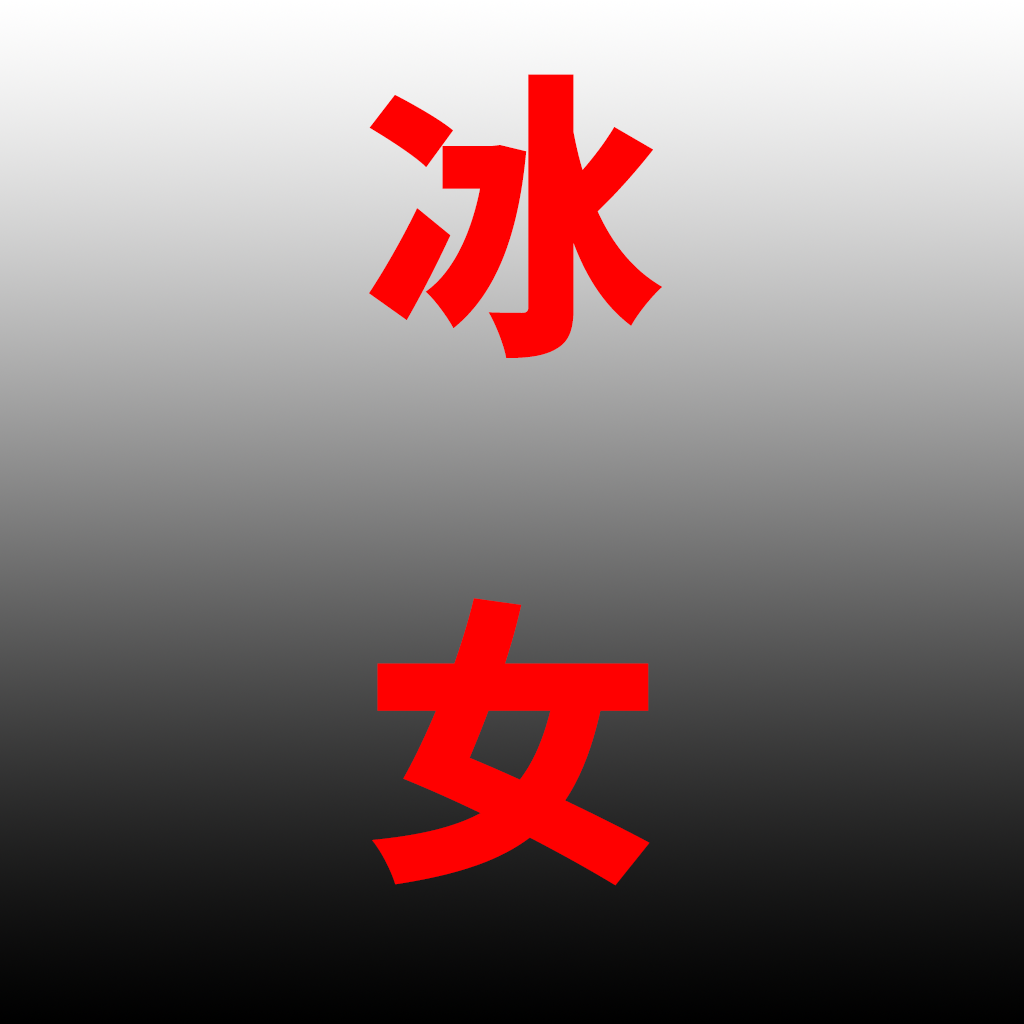
<style>
.page{position:relative;width:1024px;height:1024px}
.page>*{position:absolute;margin:0}
.t1{font:300px "NotoSansHans-Black";color:#ff0000}
</style>
<div class="page">
<p class="t1" style="left:369px;top:74px;width:293px;height:812px;text-align:center">冰女</p>
</div>
